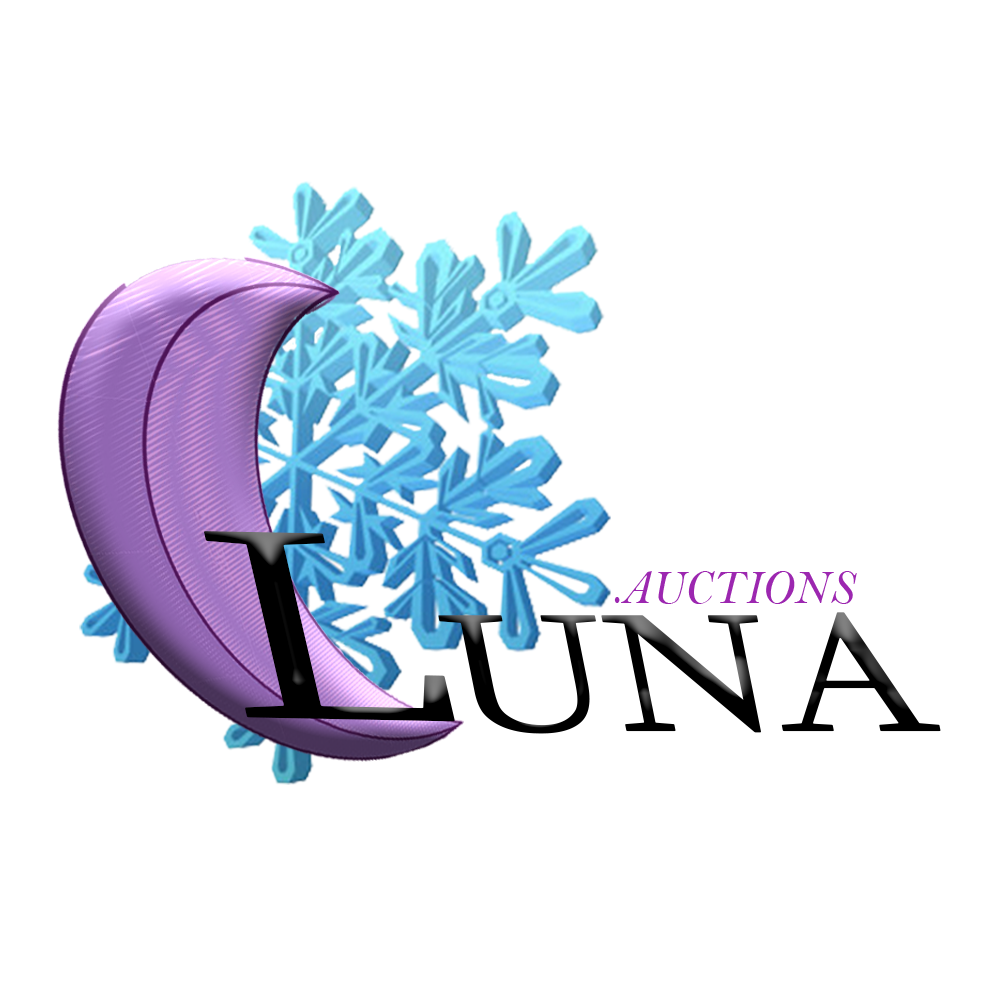
<style>
.page{position:relative;width:1000px;height:1000px;background:#ffffff}
.page>*{position:absolute;margin:0}
.t1{font:284.2px "Sylfaen";color:#000000;scale:1.49 1}
.t2{font:50.5px "BellMTItalic";color:#9c27b0;scale:0.92 1}
.t3{font:175.7px "Sylfaen";color:#000000;scale:1.28 1}
</style>
<div class="page">
<p class="t1" style="left:204px;top:531px;width:251px;height:191px;rotate:1deg">L</p>
<p class="t2" style="left:614px;top:571px;width:243px;height:33px">.AUCTIONS</p>
<p class="t3" style="left:438px;top:612px;width:503px;height:122px">UNA</p>
</div>
